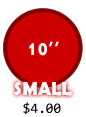
<style>
.page{position:relative;width:86px;height:117px;background:#ffffff}
.page>*{position:absolute;margin:0}
.t1{font:19px "BerlinSansFBDemi-Bold";color:#ffffff}
.t2{font:14px "Consolas";color:#000000}
</style>
<div class="page">
<p class="t1" style="left:14px;top:81px;width:58px;height:15px">SMALL</p>
<p class="t2" style="left:23px;top:102px;width:38px;height:13px">$4.00</p>
</div>
